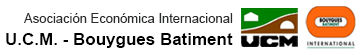
<style>
.page{position:relative;width:360px;height:55px;background:#ffffff}
.page>*{position:absolute;margin:0}
.t1{font:13px "ArialMT";color:#2a2b2c}
.t2{font:17px "Arial-BoldMT";color:#000000}
</style>
<div class="page">
<p class="t1" style="left:24px;top:13px;width:209px;height:10px">Asociación Económica Internacional</p>
<p class="t2" style="left:6px;top:33px;width:227px;height:15px">U.C.M. - Bouygues Batiment</p>
</div>
